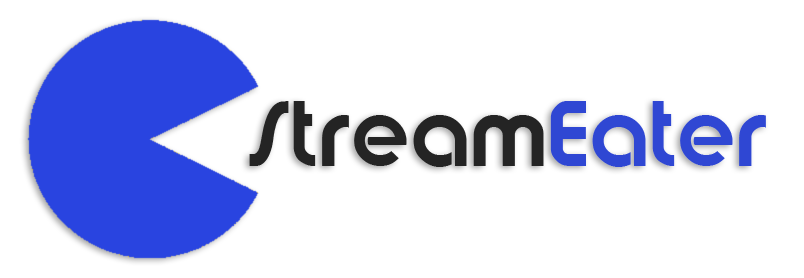
<style>
.page{position:relative;width:804px;height:278px;background:#ffffff}
.page>*{position:absolute;margin:0}
.t1{font:78px "Brandish";color:#242424}
.t2{font:78px "Brandish";color:#2f47d3}
</style>
<div class="page">
<p class="t1" style="left:249px;top:101px;width:517px;height:66px">Stream<span class="t2">Eater</span></p>
</div>
